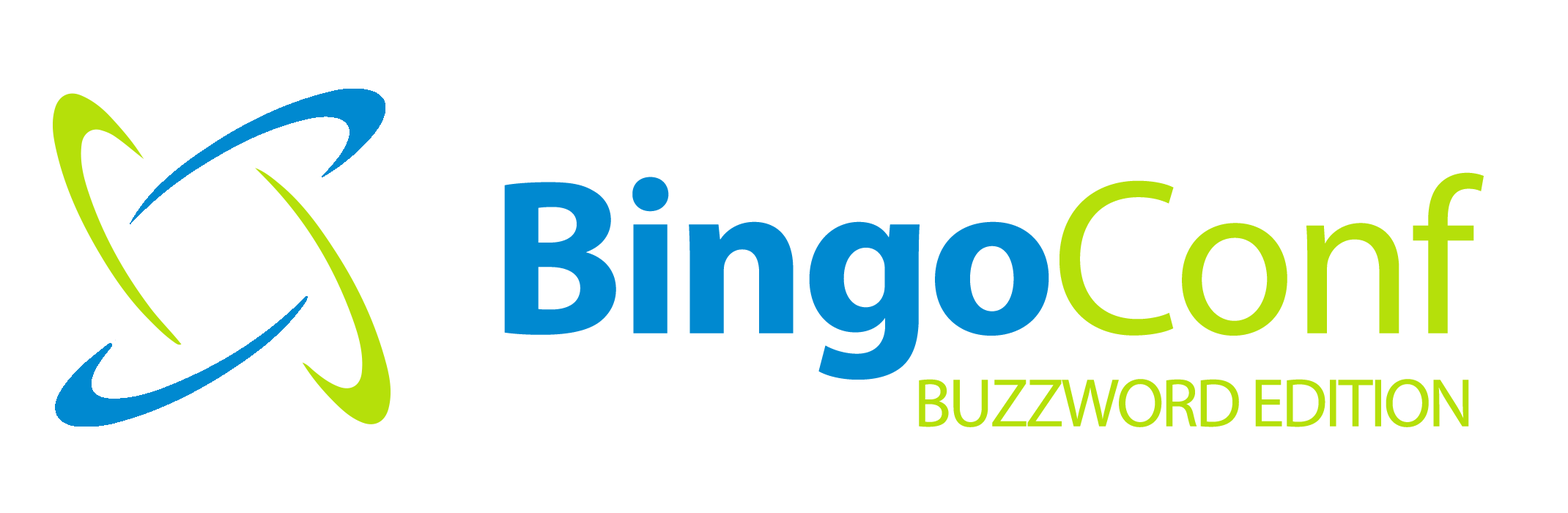
<style>
.page{position:relative;width:1568px;height:513px;background:#ffffff}
.page>*{position:absolute;margin:0}
.t1{font:222.3px "MyriadPro-Bold";letter-spacing:-0.02em;color:#0089d0}
.t2{font:222.3px "MyriadPro-Regular";letter-spacing:-0.02em;color:#b5e00a}
.t3{font:68.9px "MyriadPro-Regular";letter-spacing:-0.04em;color:#b5e00a}
</style>
<div class="page">
<p class="t1" style="left:504px;top:172px;width:980px;height:208px">Bingo<span class="t2">Conf</span></p>
<p class="t3" style="left:919px;top:379px;width:550px;height:48px">BUZZWORD EDITION</p>
</div>
